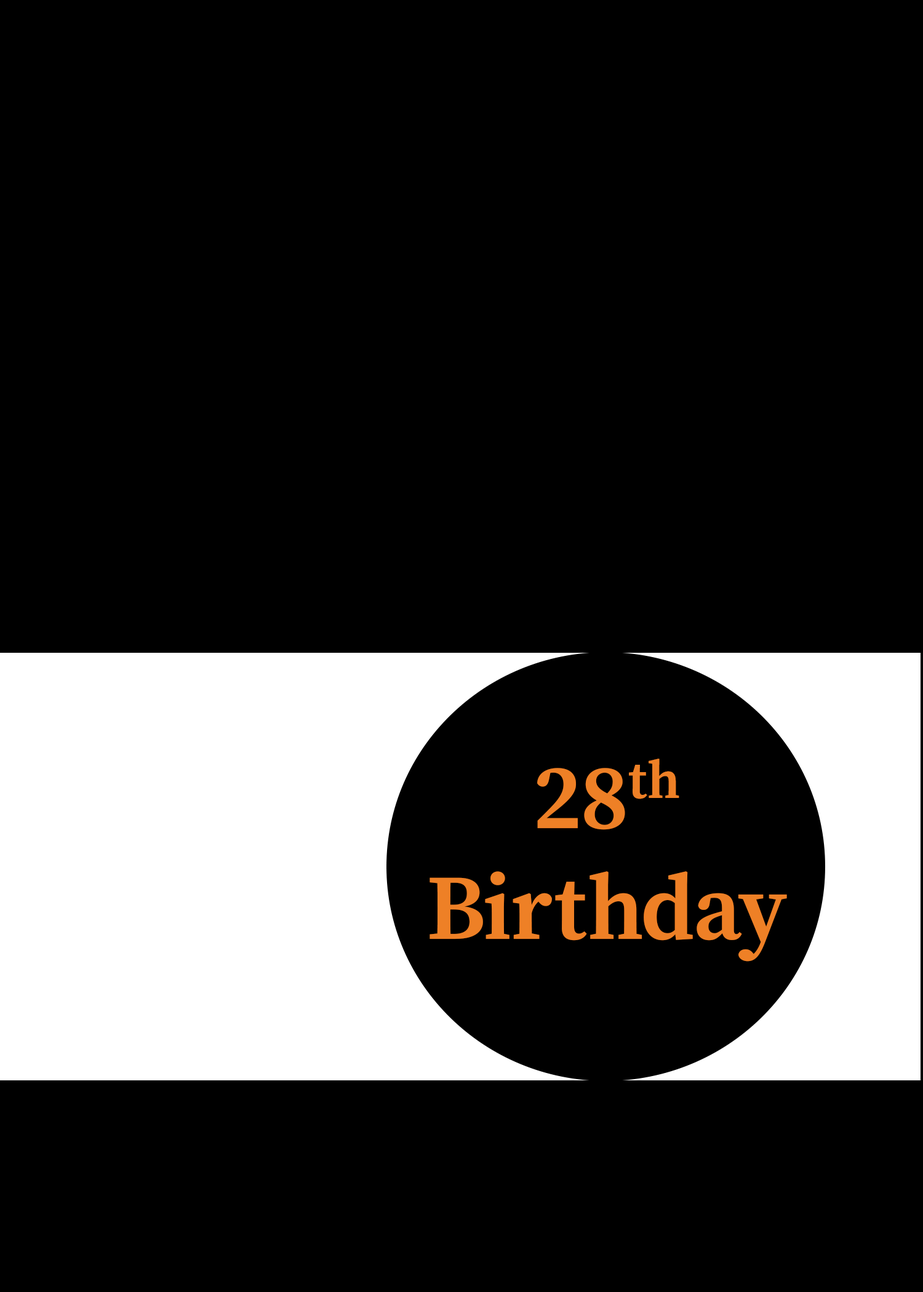
<style>
.page{position:relative;width:923px;height:1292px;background:#000000}
.page>*{position:absolute;margin:0}
.t1{font:92.3px "SourceSerifRoman_628.000wght";color:#ee8026}
.t2{font:92.3px "MyriadPro-Regular";color:#ffffff}
</style>
<div class="page">
<p class="t1" style="left:429px;top:759px;width:358px;height:203px;text-align:center"><span class="t2">    </span>28th <br>Birthday</p>
</div>
